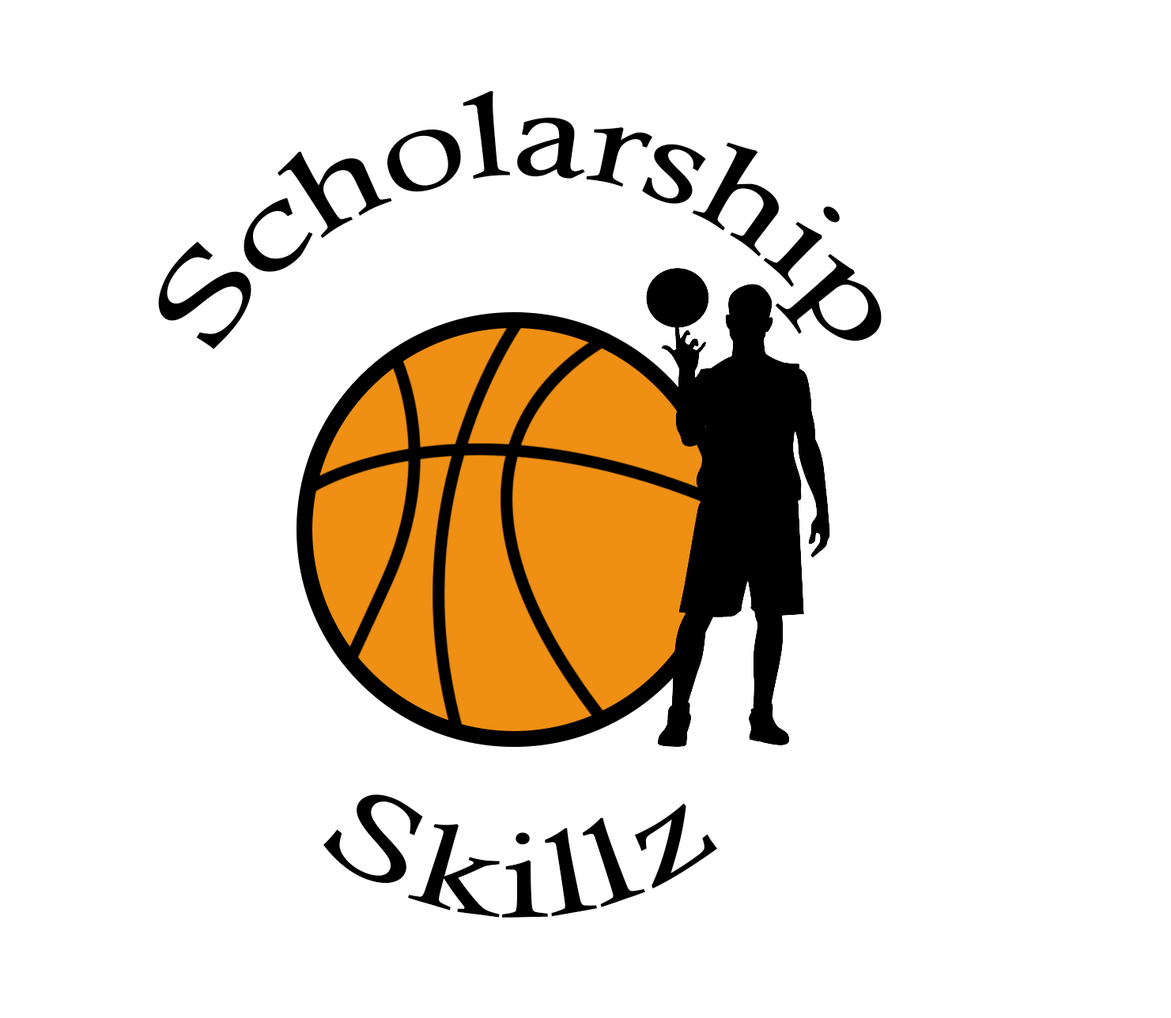
<style>
.page{position:relative;width:1171px;height:1018px;background:#ffffff}
.page>*{position:absolute;margin:0}
.t1{font:118.6px "CalistoMT";color:#000000}
</style>
<div class="page">
<p class="t1" style="left:158px;top:91px;width:724px;height:258px">Scholarship</p>
<p class="t1" style="left:323px;top:795px;width:395px;height:123px">Skillz</p>
</div>
